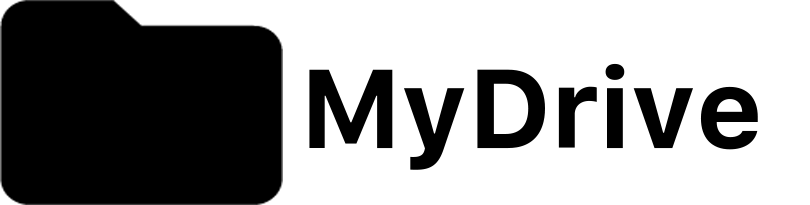
<style>
.page{position:relative;width:810px;height:205px;background:#ffffff}
.page>*{position:absolute;margin:0}
.t1{font:111.1px "Galvji-Bold";color:#000000}
</style>
<div class="page">
<p class="t1" style="left:309px;top:63px;width:449px;height:107px">MyDrive</p>
</div>
